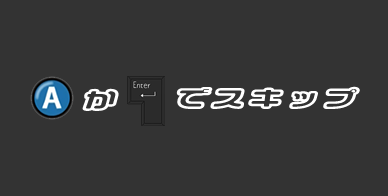
<style>
.page{position:relative;width:388px;height:196px;background:#333333}
.page>*{position:absolute;margin:0}
.t1{font:23.4px "VDL-LogoMaruJr-pop-FutoLine";color:#ffffff;font-weight:bold;font-style:italic;scale:1.54 1}
</style>
<div class="page">
<p class="t1" style="left:82px;top:88px;width:37px;height:23px">か</p>
<p class="t1" style="left:176px;top:86px;width:184px;height:23px">でスキップ</p>
</div>
